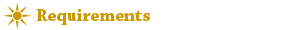
<style>
.page{position:relative;width:300px;height:30px;background:#ffffff}
.page>*{position:absolute;margin:0}
.t1{font:18px "ChaparralPro-Bold";color:#cc9900}
</style>
<div class="page">
<p class="t1" style="left:37px;top:9px;width:113px;height:16px">Requirements</p>
</div>
